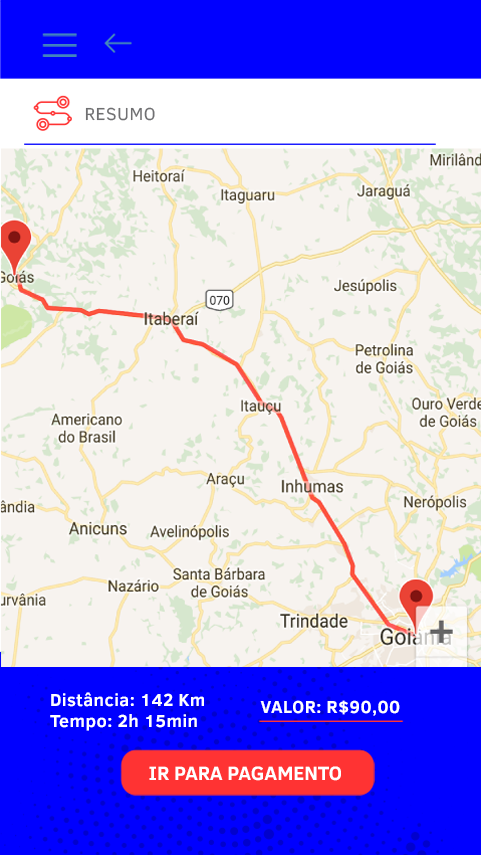
<style>
.page{position:relative;width:481px;height:855px;background:#f7f3ef}
.page>*{position:absolute;margin:0}
.t1{font:17.8px "ClearSans";letter-spacing:0.02em;color:#707072}
.t2{font:17.8px "ClearSans-Bold";letter-spacing:0.025em;color:#ffffff}
.t3{font:19.7px "ClearSans-Bold";color:#ffffff}
</style>
<div class="page">
<p class="t1" style="left:85px;top:107px;width:70px;height:14px">RESUMO</p>
<p class="t2" style="left:50px;top:692px;width:154px;height:39px">Distância: 142 Km <br>Tempo: 2h 15min</p>
<p class="t2" style="left:260px;top:700px;width:140px;height:16px">VALOR: R$90,00</p>
<p class="t3" style="left:149px;top:766px;width:192px;height:15px">IR PARA PAGAMENTO</p>
</div>
